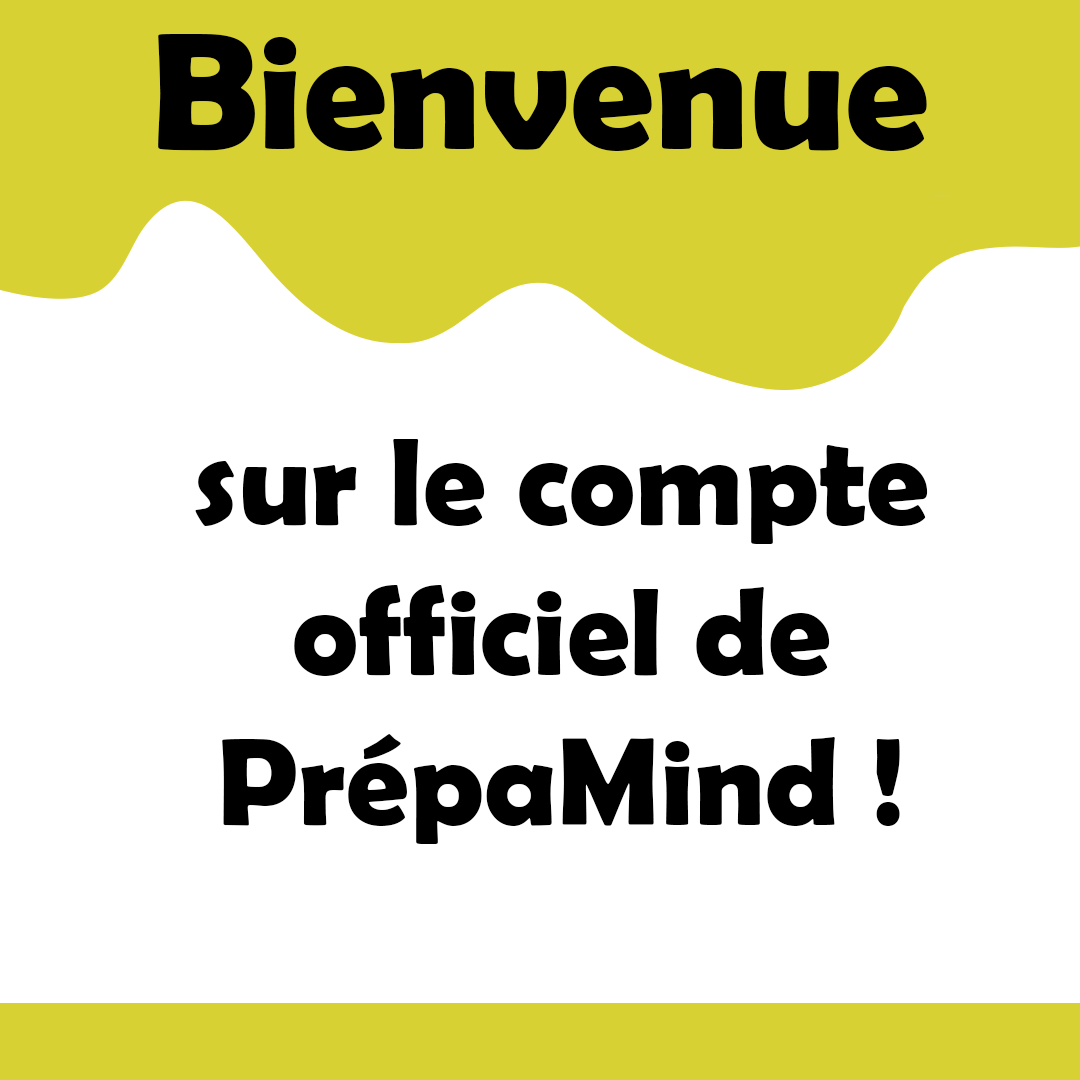
<style>
.page{position:relative;width:1080px;height:1080px;background:#ffffff}
.page>*{position:absolute;margin:0}
.t1{font:166.7px "BerlinSansFBDemi-Bold";color:#000000}
.t2{font:125px "BerlinSansFBDemi-Bold";color:#000000}
</style>
<div class="page">
<p class="t1" style="left:158px;top:34px;width:769px;height:117px">Bienvenue</p>
<p class="t2" style="left:195px;top:439px;width:733px;height:405px;text-align:center">sur le compte officiel de PrépaMind !</p>
</div>
